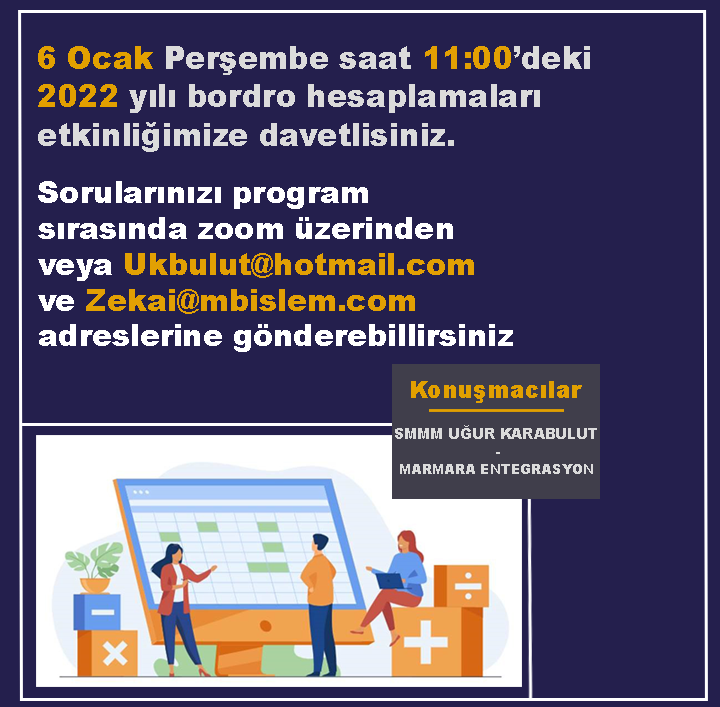
<style>
.page{position:relative;width:720px;height:707px;background:#241f4d}
.page>*{position:absolute;margin:0}
.t1{font:32px "Arial-Black";color:#dbdbdb;scale:0.94 1}
.t2{font:32px "Arial-Black";color:#e2a000;scale:0.94 1}
.t3{font:32px "Arial-Black";color:#e2a003;scale:0.94 1}
.t4{font:29.9px "Arial-Black";color:#ffffff}
.t5{font:29.9px "Arial-Black";color:#e2a003}
.t6{font:24px "Arial-Black";color:#e2a000;scale:0.95 1}
.t7{font:14.5px "Arial-Black";color:#dbdbdb;scale:0.95 1}
.t8{font:13.5px "Arial-Black";color:#dbdbdb;scale:0.95 1}
</style>
<div class="page">
<p class="t1" style="left:38px;top:46px;width:552px;height:106px"><span class="t2">6 Ocak</span> Perşembe saat <span class="t3">11:00</span>’deki<br><span class="t2">2022</span> yılı bordro hesaplamaları<br>etkinliğimize davetlisiniz.</p>
<p class="t4" style="left:38px;top:181px;width:475px;height:171px">Sorularınızı program<br>sırasında zoom üzerinden<br>veya <span class="t5">Ukbulut@hotmail.com<br></span>ve <span class="t5">Zekai@mbislem.com<br></span>adreslerine gönderebillirsiniz</p>
<p class="t6" style="left:411px;top:381px;width:171px;height:22px">Konuşmacılar</p>
<p class="t7" style="left:395px;top:425px;width:202px;height:49px">SMMM UĞUR KARABULUT<br>                      -<br>  <span class="t8">MARMARA ENTEGRASYON</span></p>
<p class="t7" style="left:395px;top:425px;width:202px;height:29px">SMMM UĞUR KARABULUT<br>                      -</p>
</div>
